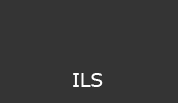
<style>
.page{position:relative;width:178px;height:103px;background:#343434}
.page>*{position:absolute;margin:0}
.t1{font:18.7px "Verdana";color:#ffffff}
</style>
<div class="page">
<p class="t1" style="left:73px;top:73px;width:30px;height:14px">ILS</p>
</div>
